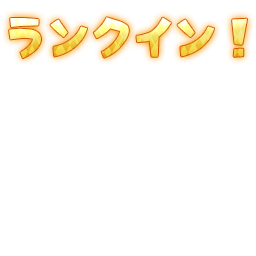
<style>
.page{position:relative;width:256px;height:256px;background:#ffffff}
.page>*{position:absolute;margin:0}
.t1{font:42.5px "KFhimajiKIDS"}
</style>
<div class="page">
<p class="t1" style="left:9px;top:17px;width:238px;height:42px">ランクイン！</p>
</div>
